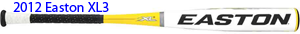
<style>
.page{position:relative;width:300px;height:34px;background:#ffffff}
.page>*{position:absolute;margin:0}
.t1{font:14px "MyriadPro-Regular";color:#0000ff}
</style>
<div class="page">
<p class="t1" style="left:13px;top:2px;width:96px;height:10px">2012 Easton XL3</p>
</div>
